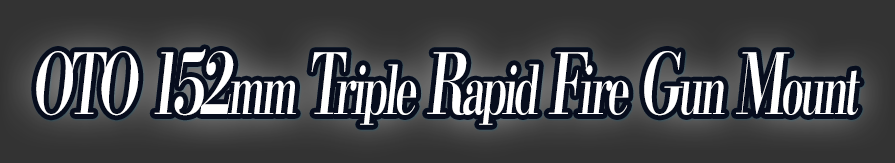
<style>
.page{position:relative;width:895px;height:163px;background:#333333}
.page>*{position:absolute;margin:0}
.t1{font:84px "KochoStd-Heavy";letter-spacing:-0.08em;color:#ffffff;font-style:italic;scale:0.62 1}
.t2{font:67.2px "KochoStd-Heavy";letter-spacing:-0.08em;color:#ffffff;font-style:italic;scale:0.62 1}
</style>
<div class="page">
<p class="t1" style="left:36px;top:49px;width:824px;height:76px">OTO 152<span class="t2">mm</span> T<span class="t2">riple</span> R<span class="t2">apid</span> F<span class="t2">ire</span> G<span class="t2">un</span> M<span class="t2">ount</span></p>
</div>
